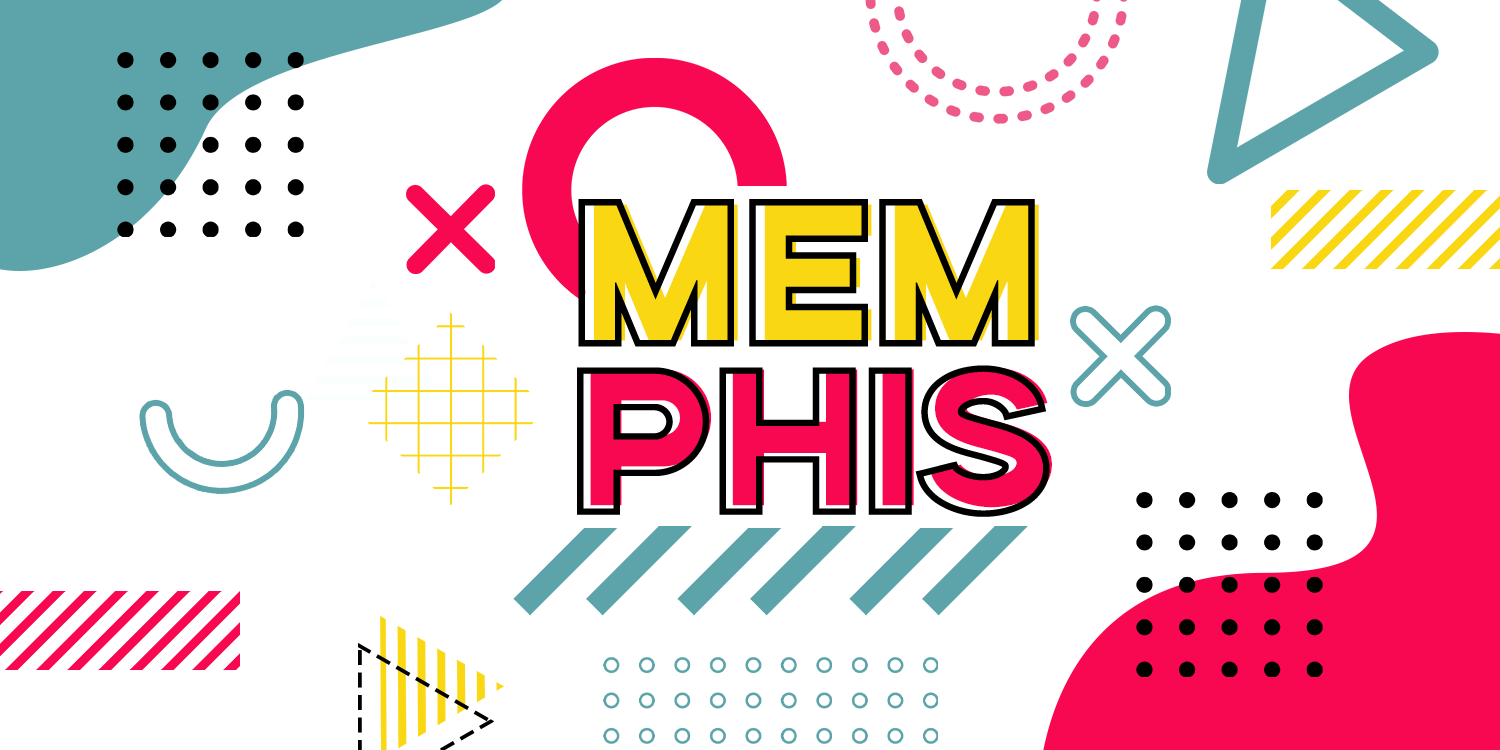
<style>
.page{position:relative;width:1500px;height:750px;background:#ffffff}
.page>*{position:absolute;margin:0}
.t1{font:193.9px "Aemstel-LineOutside";color:#000000}
.t2{font:193.9px "Aemstel-Regular";color:#fad713}
.t3{font:193.9px "Aemstel-Regular";color:#f90852}
</style>
<div class="page">
<p class="t1" style="left:578px;top:199px;width:457px;height:148px">mem</p>
<p class="t2" style="left:594px;top:204px;width:445px;height:137px">mem</p>
<p class="t1" style="left:577px;top:365px;width:473px;height:152px">phis</p>
<p class="t3" style="left:590px;top:367px;width:462px;height:141px">phis</p>
</div>
